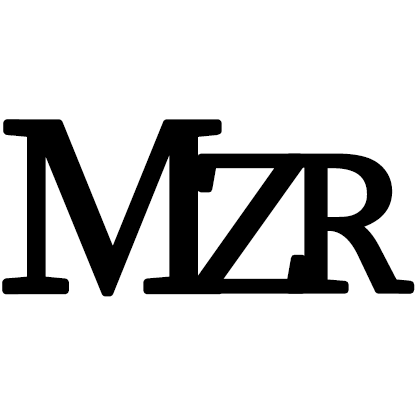
<style>
.page{position:relative;width:417px;height:416px;background:#ffffff}
.page>*{position:absolute;margin:0}
.t1{font:250px "Sylfaen";color:#000000;font-weight:bold}
.t2{font:200px "Sylfaen";color:#000000;font-weight:bold}
</style>
<div class="page">
<p class="t1" style="left:2px;top:119px;width:221px;height:178px">M</p>
<p class="t2" style="left:192px;top:153px;width:114px;height:141px">Z</p>
<p class="t2" style="left:285px;top:153px;width:130px;height:141px">R</p>
</div>
